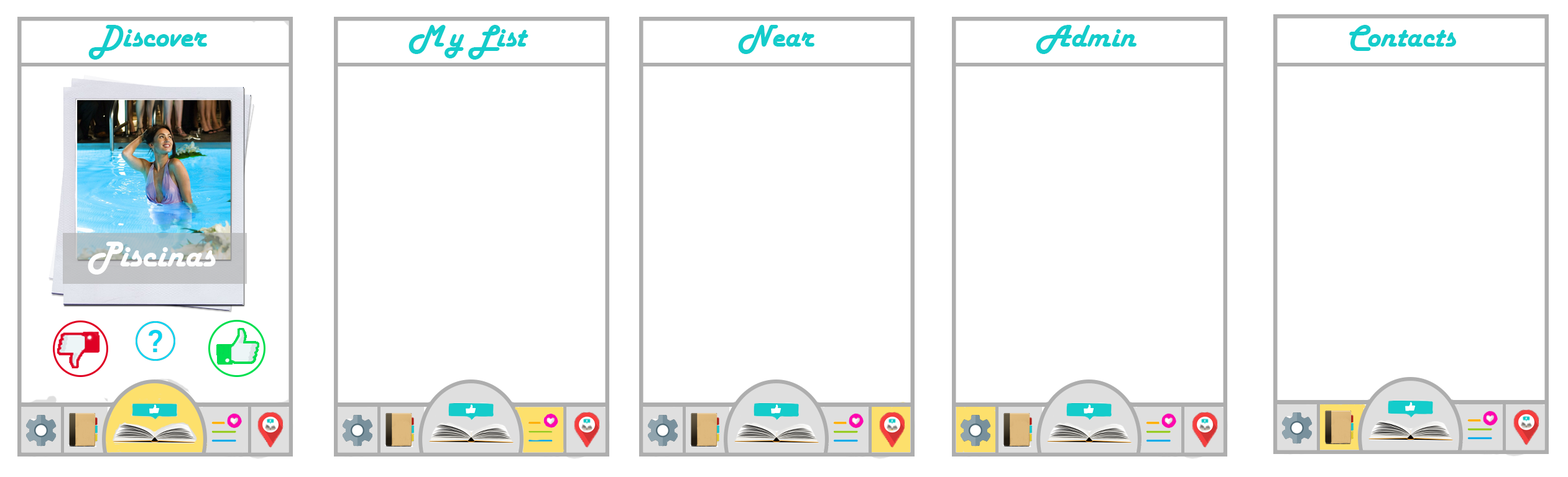
<style>
.page{position:relative;width:1568px;height:477px;background:#ffffff}
.page>*{position:absolute;margin:0}
.t1{font:33px "HarlowSolid";color:#14cccb}
.t2{font:37.3px "HarlowSolid";color:#fefefe}
</style>
<div class="page">
<p class="t1" style="left:88px;top:25px;width:119px;height:35px">Discover</p>
<p class="t1" style="left:408px;top:25px;width:120px;height:35px">M y List</p>
<p class="t1" style="left:738px;top:25px;width:76px;height:29px">Near</p>
<p class="t1" style="left:1036px;top:25px;width:101px;height:29px">Admin</p>
<p class="t1" style="left:1349px;top:25px;width:108px;height:26px">Contacts</p>
<p class="t2" style="left:88px;top:242px;width:128px;height:33px">Piscinas</p>
</div>
